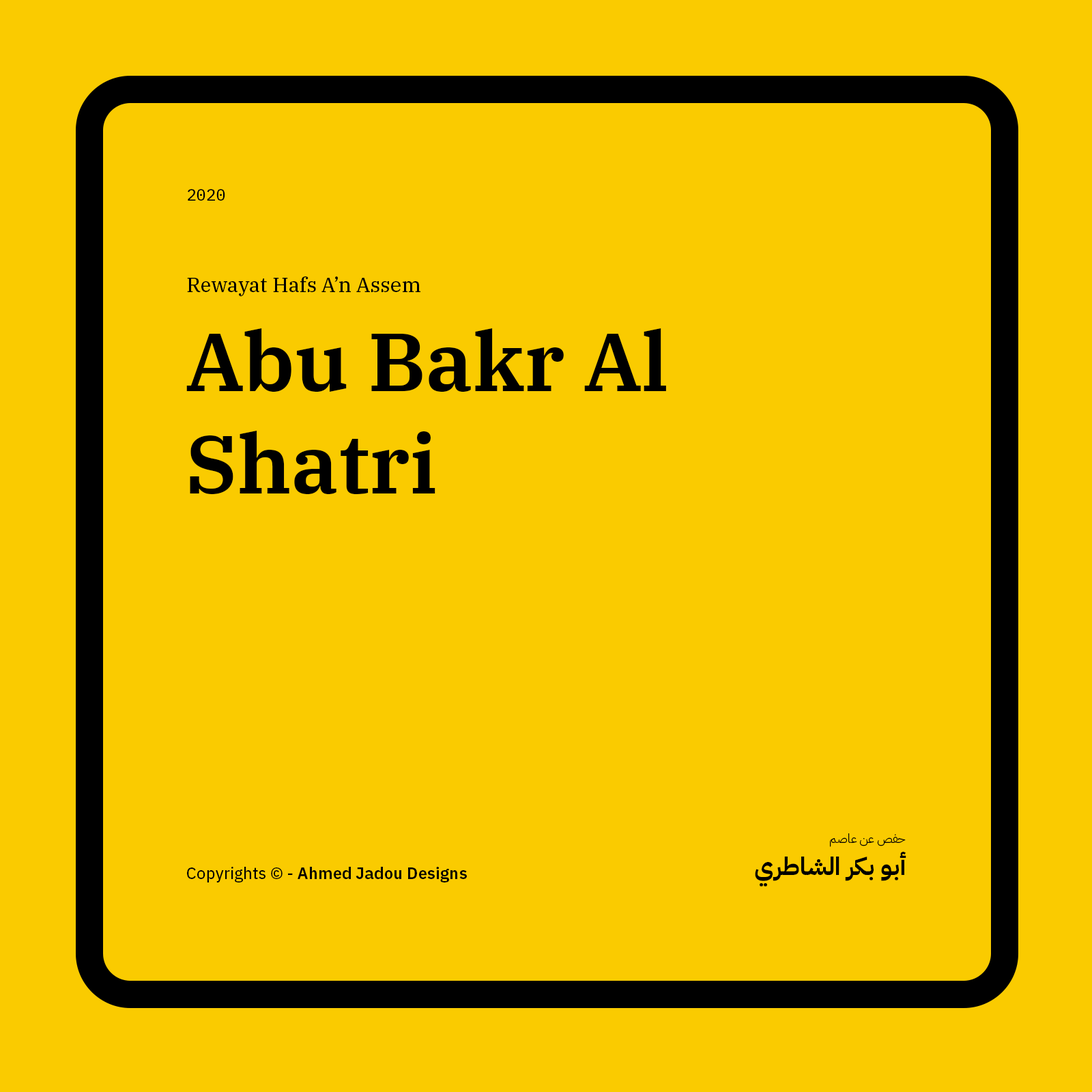
<style>
.page{position:relative;width:1092px;height:1092px;background:#facb00}
.page>*{position:absolute;margin:0}
.t1{font:16.4px "IBMPlexMono-Text";color:#000000}
.t2{font:20.5px "IBMPlexSerif-Text";color:#000000}
.t3{font:81.9px/102.7px "IBMPlexSerif-SemiBold";color:#000000}
.t4{font:12.3px "IBMPlexArabic-Light";color:#000000}
.t5{font:24.6px "IBMPlexArabic-Bold";color:#000000}
.t6{font:16.4px "IBMPlexSans-SemiBold";color:#000000}
.t7{font:16.4px "IBMPlexSans-Text";color:#000000}
</style>
<div class="page">
<p class="t1" style="left:188px;top:189px;width:37px;height:12px">2020</p>
<p class="t2" style="left:187px;top:276px;width:233px;height:20px">Rewayat Hafs A’n Assem</p>
<p class="t3" style="left:186px;top:328px;width:480px;height:166px">Abu Bakr Al Shatri</p>
<p class="t4" style="left:830px;top:833px;width:76px;height:14px">حفص عن عاصم</p>
<p class="t5" style="left:755px;top:852px;width:151px;height:35px">أبو بكر الشاطري</p>
<p class="t6" style="left:187px;top:867px;width:280px;height:15px"><span class="t7">Copyrights © - </span>Ahmed Jadou Designs</p>
</div>
